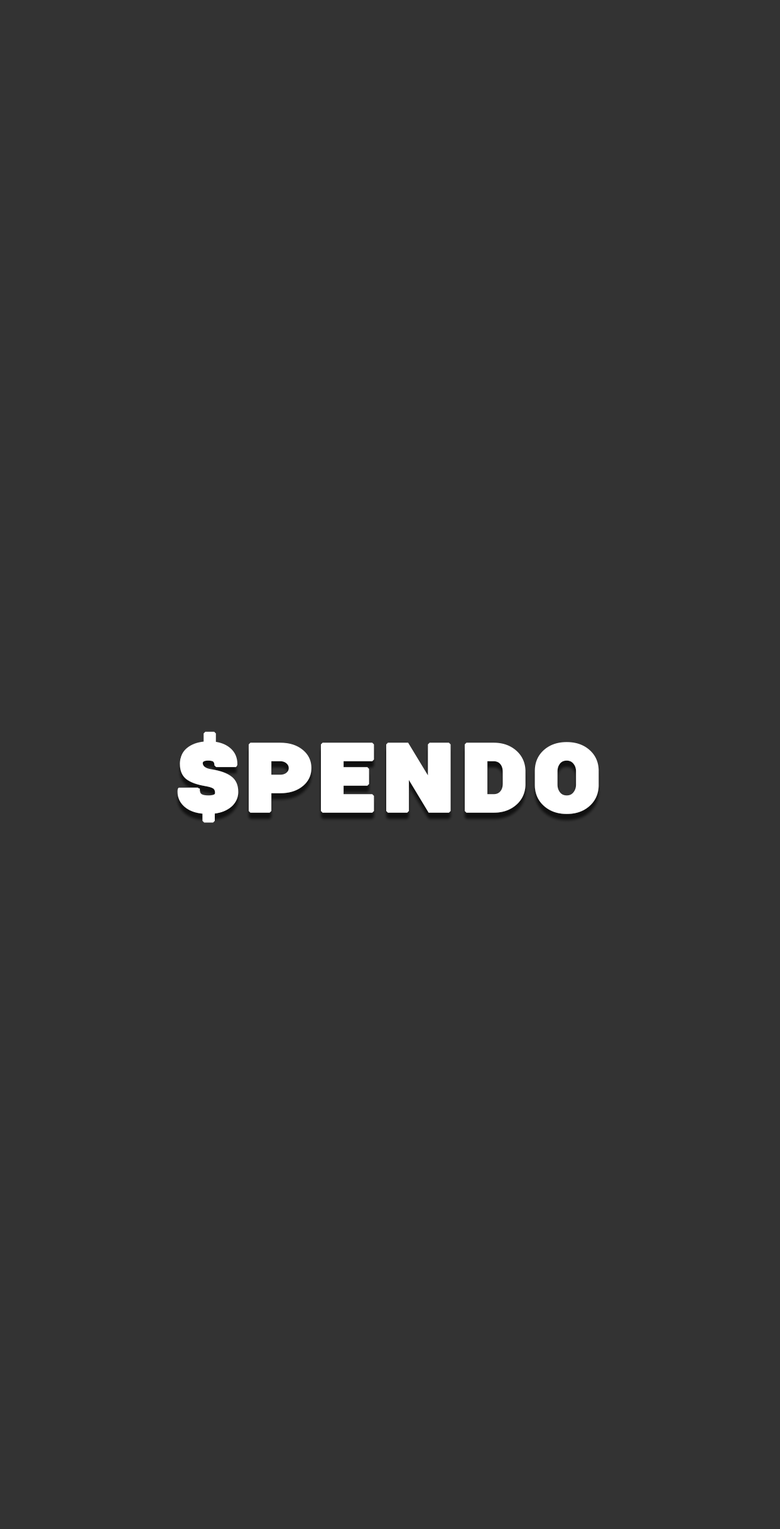
<style>
.page{position:relative;width:780px;height:1529px;background:#333333}
.page>*{position:absolute;margin:0}
.t1{font:93.9px "Roboto-Black";color:#ffffff;font-variant:small-caps;font-weight:bold;scale:1.21 1}
.t2{font:116.7px "Roboto-Black";color:#ffffff;font-variant:small-caps;font-weight:bold}
</style>
<div class="page">
<p class="t1" style="left:178px;top:731px;width:59px;height:92px">$</p>
<p class="t2" style="left:177px;top:742px;width:422px;height:72px">SPENDO</p>
</div>
